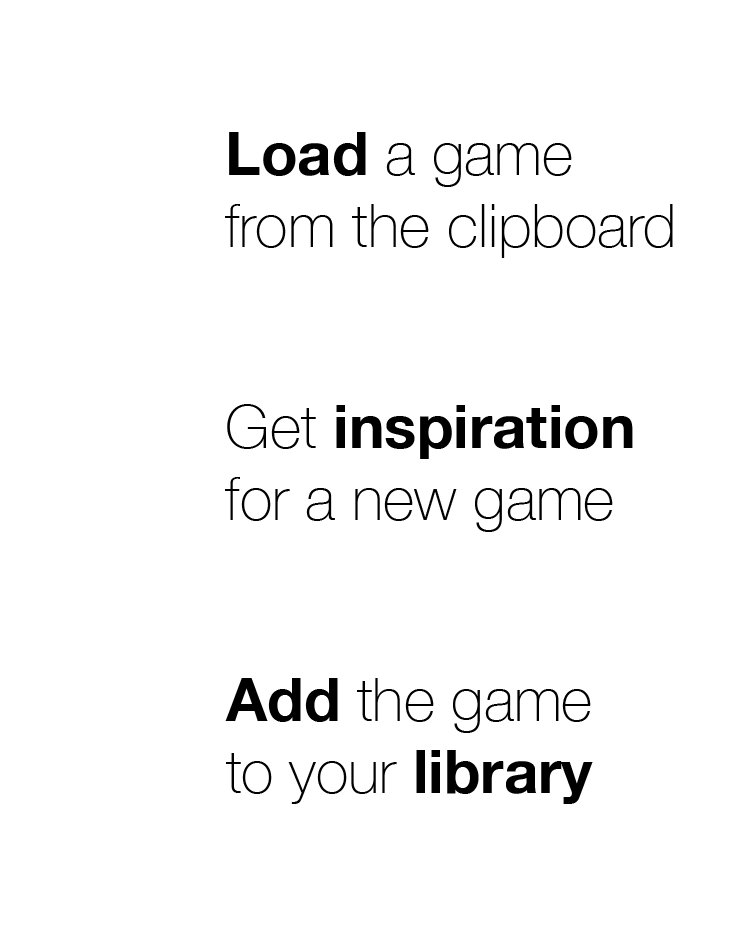
<style>
.page{position:relative;width:750px;height:952px;background:#ffffff}
.page>*{position:absolute;margin:0}
.t1{font:60px "HelveticaNeue-Thin";color:#000000}
.t2{font:60px "HelveticaNeue-Bold";color:#000000}
</style>
<div class="page">
<p class="t1" style="left:225px;top:132px;width:448px;height:126px"><span class="t2">Load </span>a game <br>from the clipboard</p>
<p class="t1" style="left:225px;top:404px;width:408px;height:128px">Get <span class="t2">inspiration<br></span>for a new game</p>
<p class="t1" style="left:225px;top:678px;width:368px;height:126px"><span class="t2">Add </span>the game <br>to your <span class="t2">library</span></p>
</div>
